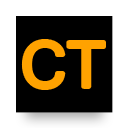
<style>
.page{position:relative;width:128px;height:128px;background:#000000}
.page>*{position:absolute;margin:0}
.t1{font:63.5px "MicrosoftSansSerif";color:#ffa200}
</style>
<div class="page">
<p class="t1" style="left:23px;top:41px;width:81px;height:47px">CT</p>
</div>
